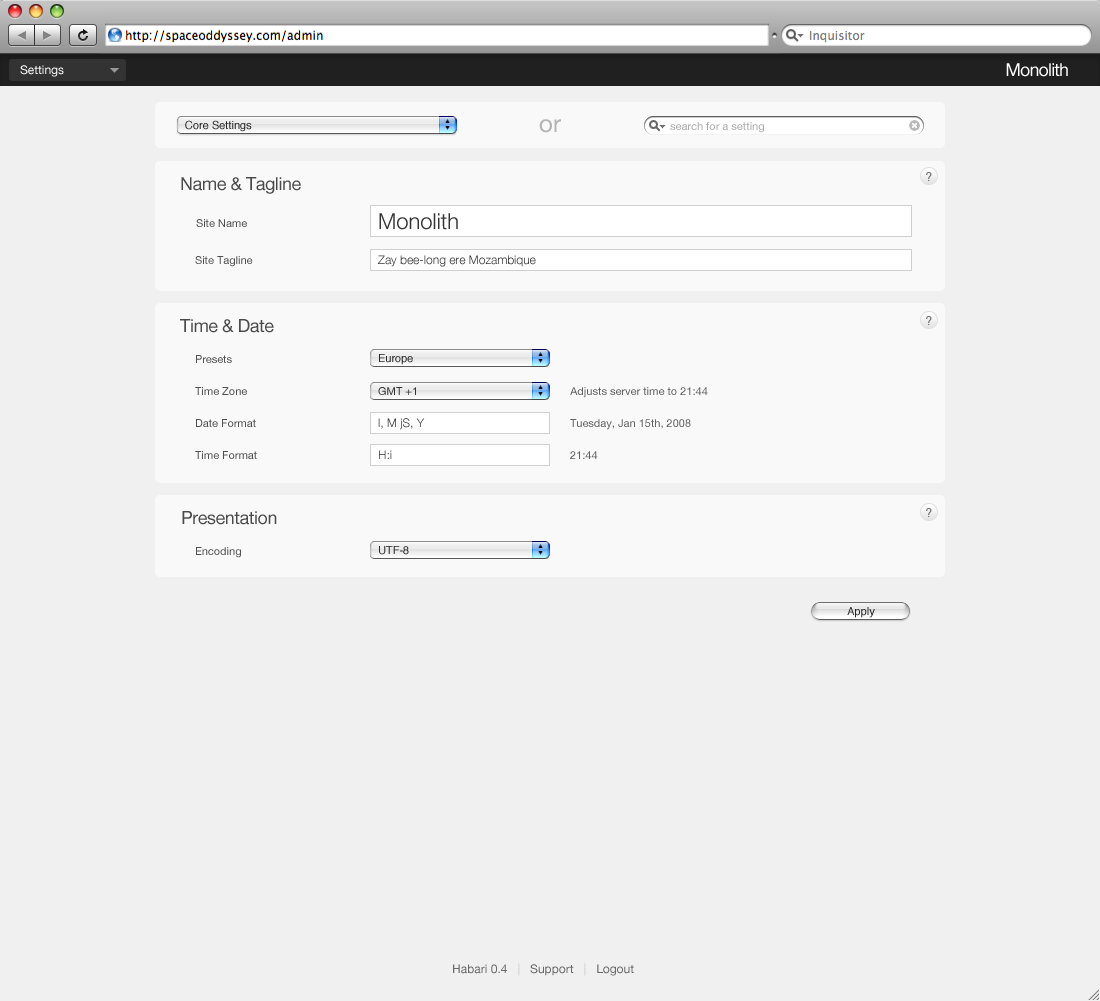
<style>
.page{position:relative;width:1100px;height:1001px;background:#f0f0f0}
.page>*{position:absolute;margin:0}
.t1{font:12px "HelveticaNeue";color:#ffffff}
.t2{font:18px "HelveticaNeue";letter-spacing:-0.05em;color:#ffffff}
.t3{font:11px "Helvetica";color:#242424}
.t4{font:24px "HelveticaNeue";color:#b4b4b4}
.t5{font:11px "HelveticaNeue";color:#ababab}
.t6{font:12px "Helvetica";color:#767676}
.t7{font:18px "HelveticaNeue";letter-spacing:-0.025em;color:#4a4a4a}
.t8{font:11px "HelveticaNeue";color:#525151}
.t9{font:22px "HelveticaNeue-Light";color:#333333}
.t10{font:12px "HelveticaNeue-Light";color:#333333}
.t11{font:11px "HelveticaNeue";color:#333333}
.t12{font:11px "HelveticaNeue";color:#626262}
.t13{font:12px "HelveticaNeue";color:#696969}
.t14{font:12px "HelveticaNeue";color:#c5c5c5}
</style>
<div class="page">
<p class="t1" style="left:20px;top:65px;width:44px;height:12px">Settings</p>
<p class="t2" style="left:1006px;top:63px;width:62px;height:14px">Monolith</p>
<p class="t3" style="left:185px;top:120px;width:67px;height:12px">Core Settings</p>
<p class="t4" style="left:539px;top:119px;width:22px;height:14px">or</p>
<p class="t5" style="left:670px;top:122px;width:94px;height:11px">search for a setting</p>
<p class="t6" style="left:926px;top:172px;width:6px;height:9px">?</p>
<p class="t7" style="left:181px;top:177px;width:120px;height:17px">Name &amp; Tagline</p>
<p class="t8" style="left:196px;top:219px;width:51px;height:8px">Site Name</p>
<p class="t9" style="left:379px;top:213px;width:79px;height:17px">Monolith</p>
<p class="t8" style="left:195px;top:256px;width:58px;height:11px">Site Tagline</p>
<p class="t10" style="left:378px;top:255px;width:158px;height:12px">Zay bee-long ere Mozambique</p>
<p class="t6" style="left:926px;top:316px;width:6px;height:9px">?</p>
<p class="t7" style="left:180px;top:319px;width:94px;height:14px">Time &amp; Date</p>
<p class="t8" style="left:196px;top:355px;width:36px;height:8px">Presets</p>
<p class="t3" style="left:379px;top:354px;width:34px;height:11px">Europe</p>
<p class="t8" style="left:195px;top:387px;width:52px;height:8px">Time Zone</p>
<p class="t11" style="left:378px;top:387px;width:38px;height:8px">GMT +1</p>
<p class="t12" style="left:570px;top:387px;width:138px;height:11px">Adjusts server time to 21:44</p>
<p class="t8" style="left:196px;top:419px;width:60px;height:8px">Date Format</p>
<p class="t10" style="left:378px;top:418px;width:47px;height:12px">l, M jS, Y</p>
<p class="t12" style="left:570px;top:419px;width:121px;height:11px">Tuesday, Jan 15th, 2008</p>
<p class="t8" style="left:195px;top:451px;width:62px;height:8px">Time Format</p>
<p class="t10" style="left:379px;top:450px;width:13px;height:9px">H:i</p>
<p class="t12" style="left:570px;top:451px;width:28px;height:8px">21:44</p>
<p class="t6" style="left:926px;top:508px;width:6px;height:9px">?</p>
<p class="t7" style="left:182px;top:511px;width:95px;height:14px">Presentation</p>
<p class="t8" style="left:196px;top:547px;width:45px;height:11px">Encoding</p>
<p class="t3" style="left:379px;top:546px;width:30px;height:9px">UTF-8</p>
<p class="t3" style="left:847px;top:607px;width:28px;height:11px">Apply</p>
<p class="t13" style="left:453px;top:963px;width:181px;height:13px">Habari 0.4   <span class="t14">|</span>   Support   <span class="t14">|</span>   Logout</p>
</div>
